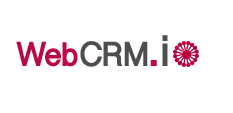
<style>
.page{position:relative;width:233px;height:113px;background:#ffffff}
.page>*{position:absolute;margin:0}
.t1{font:35px "MyanmarSangamMN-Bold";letter-spacing:-0.02em;color:#ba0843}
.t2{font:35px "MyanmarSangamMN-Bold";letter-spacing:-0.02em;color:#4e4e4e}
.t3{font:45.2px "MyanmarSangamMN-Bold";letter-spacing:0.06em;color:#ba0843}
.t4{font:45.2px "MyanmarSangamMN-Bold";letter-spacing:0.06em;color:#4e4e4e}
</style>
<div class="page">
<p class="t1" style="left:16px;top:41px;width:132px;height:26px">Web<span class="t2">CRM</span></p>
<p class="t3" style="left:150px;top:35px;width:18px;height:31px">.<span class="t4">i</span></p>
</div>
